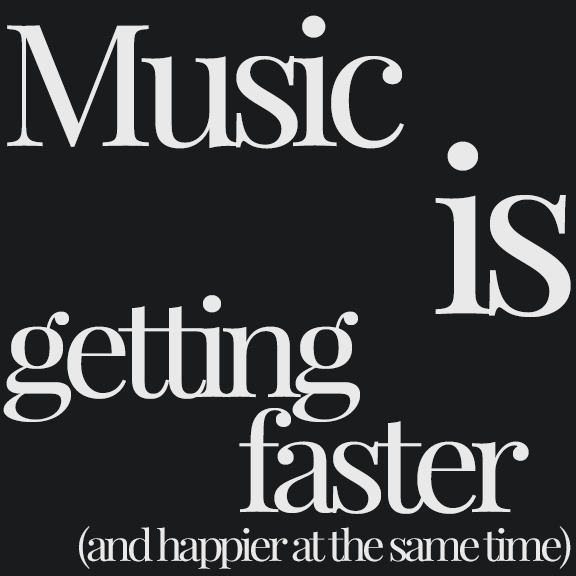
<style>
.page{position:relative;width:576px;height:576px;background:#191b1c}
.page>*{position:absolute;margin:0}
.t1{font:170.2px "PlayfairDisplay-Regular";letter-spacing:-0.095em;color:#e9e9e9;scale:1.05 1}
.t2{font:225px "PlayfairDisplay-Regular";letter-spacing:-0.095em;color:#e9e9e9;scale:1.05 1}
.t3{font:133px "PlayfairDisplay-Regular";letter-spacing:-0.095em;color:#e9e9e9;scale:1.05 1}
.t4{font:43px "PlayfairDisplay-Regular";letter-spacing:-0.095em;color:#e9e9e9;scale:1.05 1}
</style>
<div class="page">
<p class="t1" style="left:7px;top:15px;width:397px;height:134px">Music</p>
<p class="t2" style="left:435px;top:141px;width:136px;height:176px">is</p>
<p class="t3" style="left:3px;top:295px;width:357px;height:127px">getting</p>
<p class="t3" style="left:239px;top:408px;width:290px;height:106px">faster</p>
<p class="t4" style="left:79px;top:526px;width:492px;height:43px">(and happier at the same time)</p>
</div>
